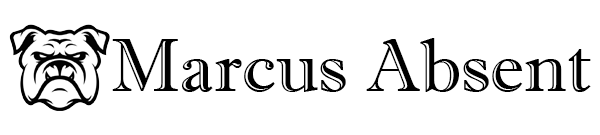
<style>
.page{position:relative;width:600px;height:135px;background:#ffffff}
.page>*{position:absolute;margin:0}
.t1{font:75px "ImprintMT-Shadow";color:#000000}
</style>
<div class="page">
<p class="t1" style="left:112px;top:38px;width:479px;height:54px">Marcus Absent</p>
</div>
